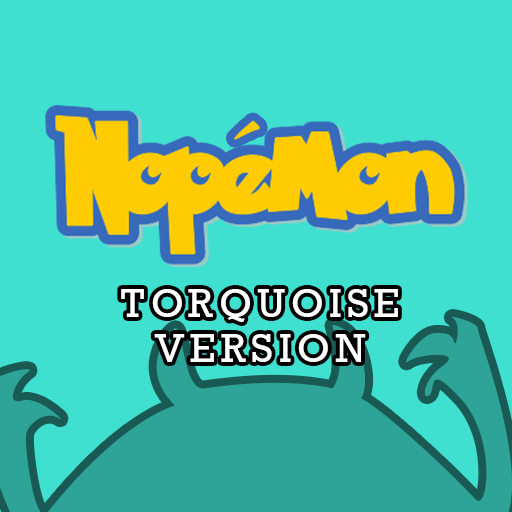
<style>
.page{position:relative;width:512px;height:512px;background:#40e0d0}
.page>*{position:absolute;margin:0}
.t1{font:37.5px "Rockwell-Regular";letter-spacing:0.15em;color:#ffffff}
</style>
<div class="page">
<p class="t1" style="left:121px;top:289px;width:277px;height:73px;text-align:center">TORQUOISE<br>VERSION</p>
</div>
